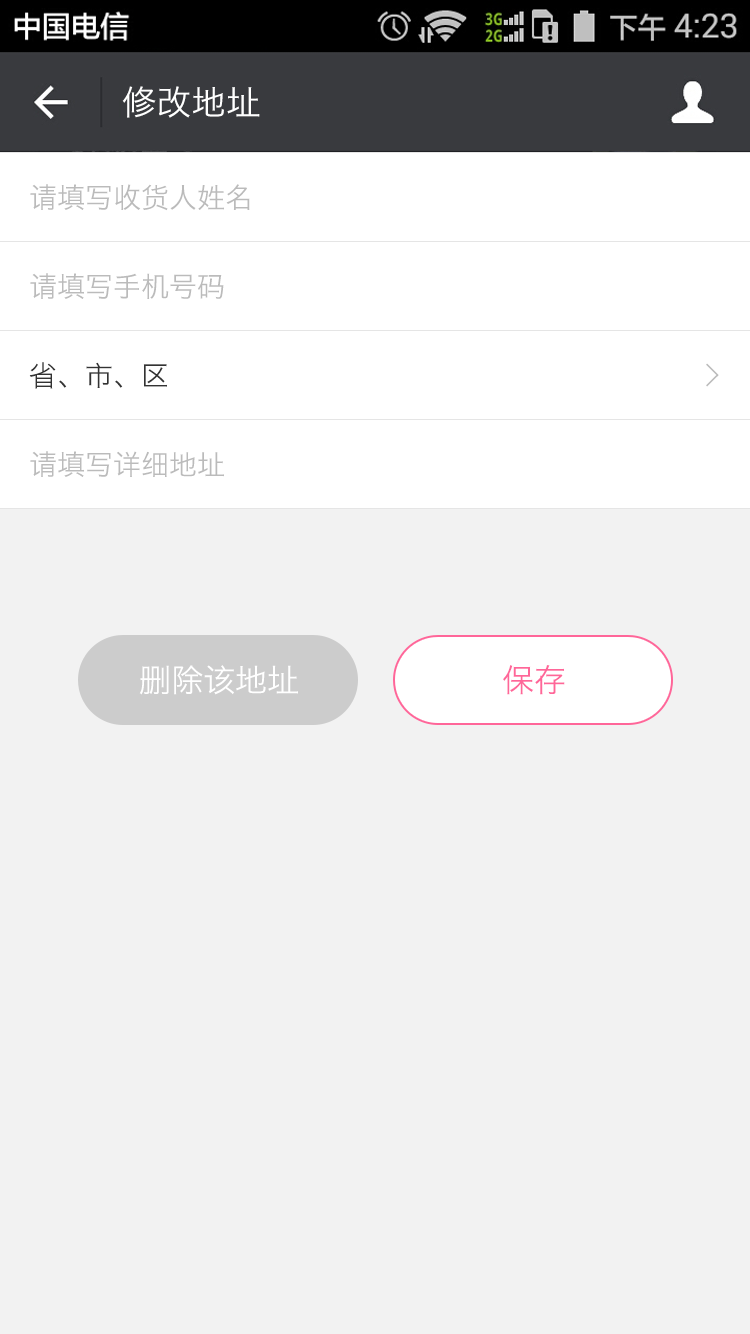
<style>
.page{position:relative;width:750px;height:1334px;background:#f2f2f2}
.page>*{position:absolute;margin:0}
.t1{font:34px "HiraginoSansGB-W3";letter-spacing:0.022em;color:#ffffff}
.t2{font:28px "HiraginoSansGB-W3";color:#bbbbbb}
.t3{font:28px "HiraginoSansGB-W3";color:#333333}
.t4{font:32px "SimSun";color:#bbbbbb;font-weight:bold}
.t5{font:32px "HiraginoSansGB-W3";color:#ffffff}
.t6{font:32px "HiraginoSansGB-W3";color:#ff6699}
</style>
<div class="page">
<p class="t1" style="left:122px;top:86px;width:138px;height:32px">修改地址</p>
<p class="t2" style="left:30px;top:184px;width:220px;height:27px">请填写收货人姓名</p>
<p class="t2" style="left:30px;top:273px;width:194px;height:26px">请填写手机号码</p>
<p class="t3" style="left:29px;top:362px;width:138px;height:27px">省、市、区</p>
<p class="t4" style="left:706px;top:363px;width:13px;height:24px">&gt;</p>
<p class="t2" style="left:30px;top:451px;width:194px;height:26px">请填写详细地址</p>
<p class="t5" style="left:139px;top:665px;width:159px;height:30px">删除该地址</p>
<p class="t6" style="left:503px;top:665px;width:62px;height:30px">保存</p>
</div>
